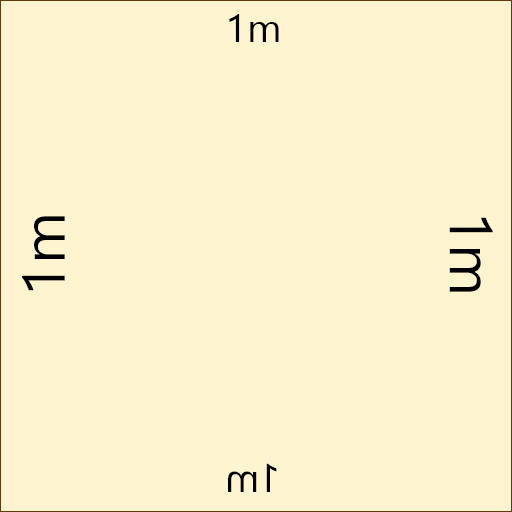
<style>
.page{position:relative;width:512px;height:512px;background:#fff4d0}
.page>*{position:absolute;margin:0}
.t1{font:40px "SegoeUI";color:#000000}
.t2{font:60px "SegoeUI";color:#000000}
.t3{font:60.3px "SegoeUI";color:#000000}
.t4{font:39.6px "SegoeUI";color:#000000}
</style>
<div class="page">
<p class="t1" style="left:229px;top:14px;width:50px;height:28px">1m</p>
<p class="t2" style="left:22px;top:216px;width:43px;height:75px;rotate:-90deg">1m</p>
<p class="t3" style="left:449px;top:217px;width:44px;height:75px;rotate:90deg">1m</p>
<p class="t4" style="left:228px;top:463px;width:49px;height:29px;rotate:180deg">1m</p>
</div>
